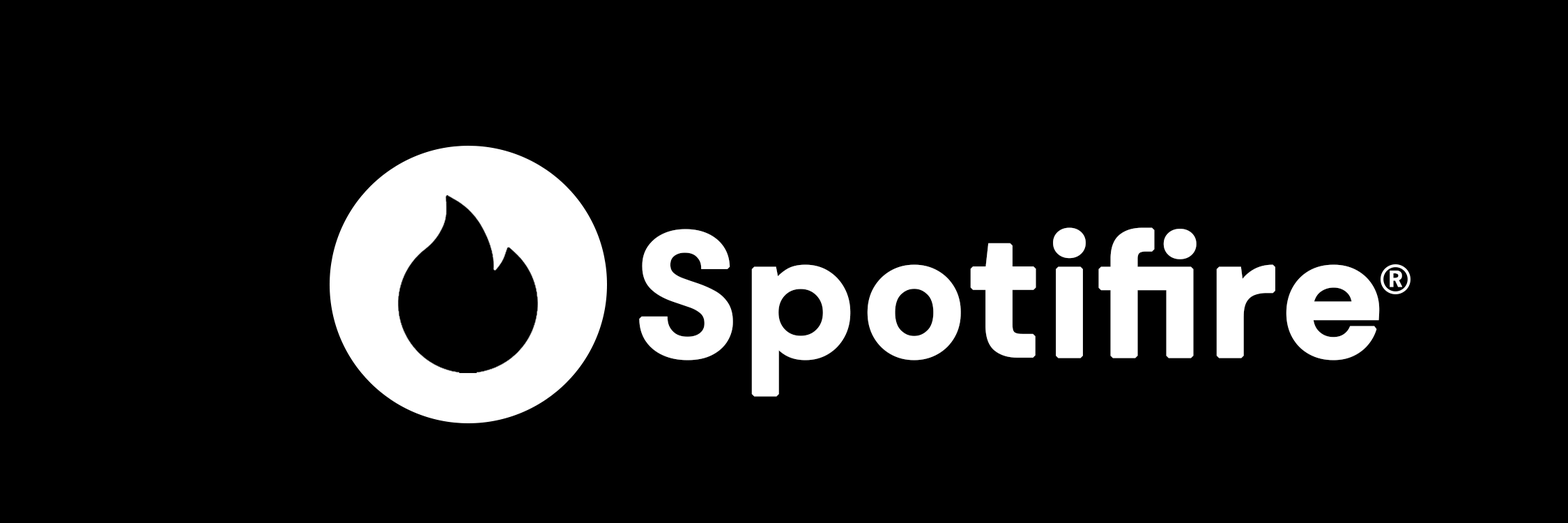
<style>
.page{position:relative;width:1568px;height:523px;background:#000000}
.page>*{position:absolute;margin:0}
.t1{font:174.2px "DMSans-Bold";color:#ffffff;font-weight:bold}
.t2{font:23.2px "DMSans-Bold";color:#ffffff;font-weight:bold}
</style>
<div class="page">
<p class="t1" style="left:639px;top:227px;width:741px;height:170px">Spotifire</p>
<p class="t2" style="left:1390px;top:270px;width:12px;height:17px">R</p>
</div>
